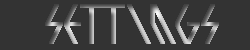
<style>
.page{position:relative;width:250px;height:50px;background:#333333}
.page>*{position:absolute;margin:0}
.t1{font:48px "exoziti";font-weight:bold}
</style>
<div class="page">
<p class="t1" style="left:45px;top:4px;width:174px;height:40px">SETTINGS</p>
</div>
